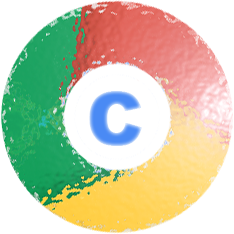
<style>
.page{position:relative;width:234px;height:234px;background:#ffffff}
.page>*{position:absolute;margin:0}
.t1{font:72px "Arial-Black";color:#4a8af4;font-weight:bold}
</style>
<div class="page">
<p class="t1" style="left:89px;top:91px;width:53px;height:55px">C</p>
</div>
